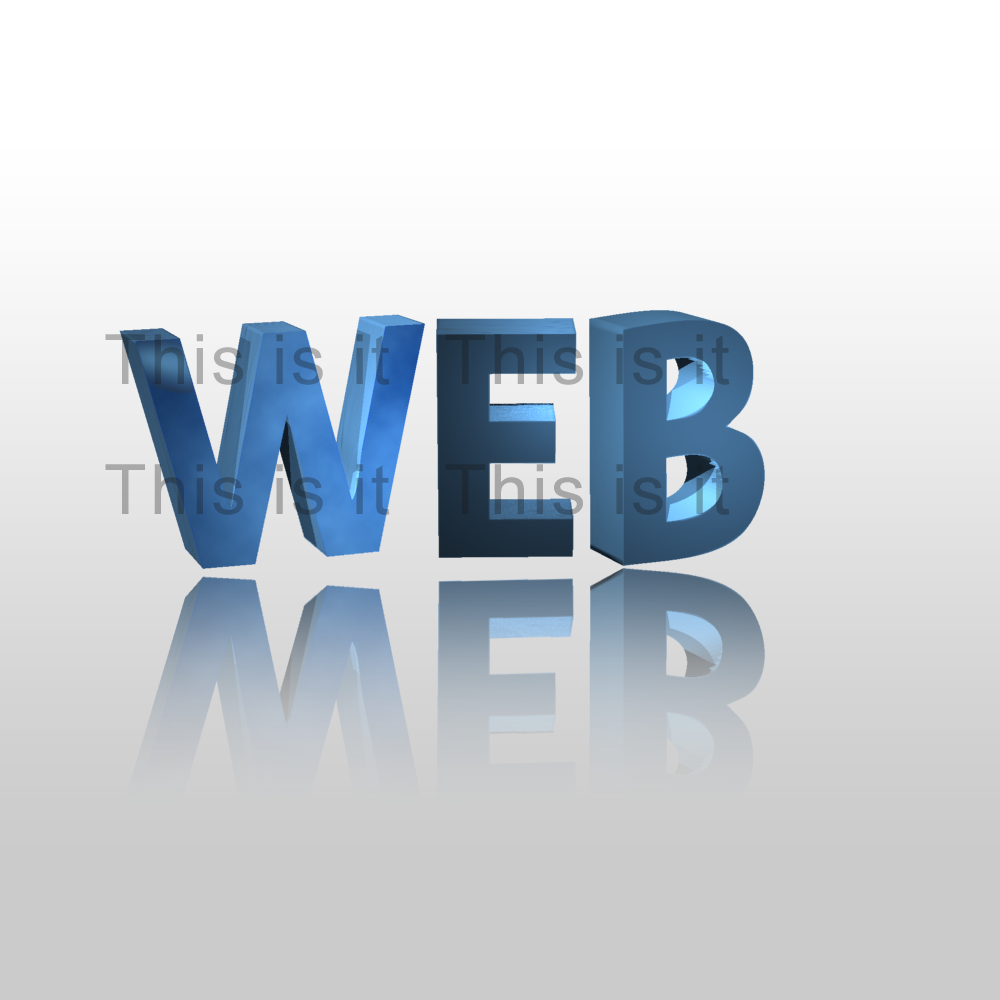
<style>
.page{position:relative;width:1000px;height:1000px}
.page>*{position:absolute;margin:0}
.t1{font:69.4px "ArialMT";letter-spacing:0.05em}
</style>
<div class="page">
<p class="t1" style="left:105px;top:334px;width:285px;height:51px">This is it</p>
<p class="t1" style="left:105px;top:464px;width:285px;height:51px">This is it</p>
</div>
